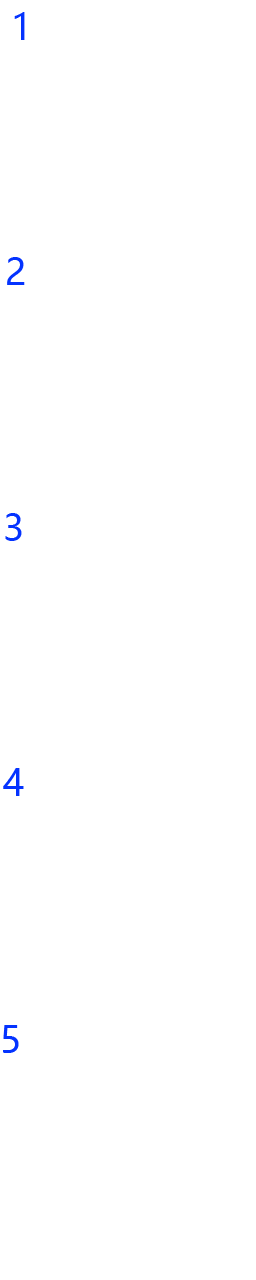
<style>
.page{position:relative;width:256px;height:1280px;background:#ffffff}
.page>*{position:absolute;margin:0}
.t1{font:36px "MicrosoftYaHei";color:#0433ff}
</style>
<div class="page">
<p class="t1" style="left:14px;top:12px;width:11px;height:28px">1</p>
<p class="t1" style="left:7px;top:257px;width:18px;height:28px">2</p>
<p class="t1" style="left:5px;top:513px;width:17px;height:28px">3</p>
<p class="t1" style="left:3px;top:768px;width:21px;height:28px">4</p>
<p class="t1" style="left:3px;top:1025px;width:16px;height:28px">5</p>
</div>
